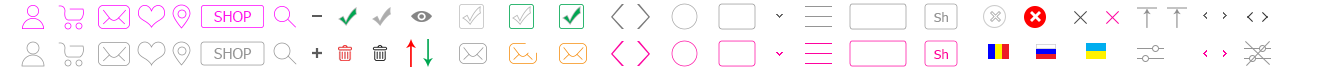
<style>
.page{position:relative;width:1320px;height:70px;background:#ffffff}
.page>*{position:absolute;margin:0}
.t1{font:14.9px "Tahoma";color:#ff13ec}
.t2{font:13.3px "Tahoma";color:#959595}
.t3{font:14.9px "Tahoma";color:#959595}
.t4{font:13.3px "Tahoma";color:#fe029f}
</style>
<div class="page">
<p class="t1" style="left:214px;top:11px;width:38px;height:11px">SHOP</p>
<p class="t2" style="left:934px;top:12px;width:14px;height:10px">Sh</p>
<p class="t3" style="left:214px;top:48px;width:38px;height:11px">SHOP</p>
<p class="t4" style="left:934px;top:49px;width:14px;height:10px">Sh</p>
</div>
